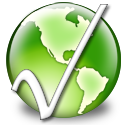
<style>
.page{position:relative;width:128px;height:128px;background:#ffffff}
.page>*{position:absolute;margin:0}
.t1{font:122.6px "LucidaHandwriting-Italic";letter-spacing:-0.05em;color:#ffffff}
</style>
<div class="page">
<p class="t1" style="left:11px;top:4px;width:97px;height:116px">√</p>
</div>
